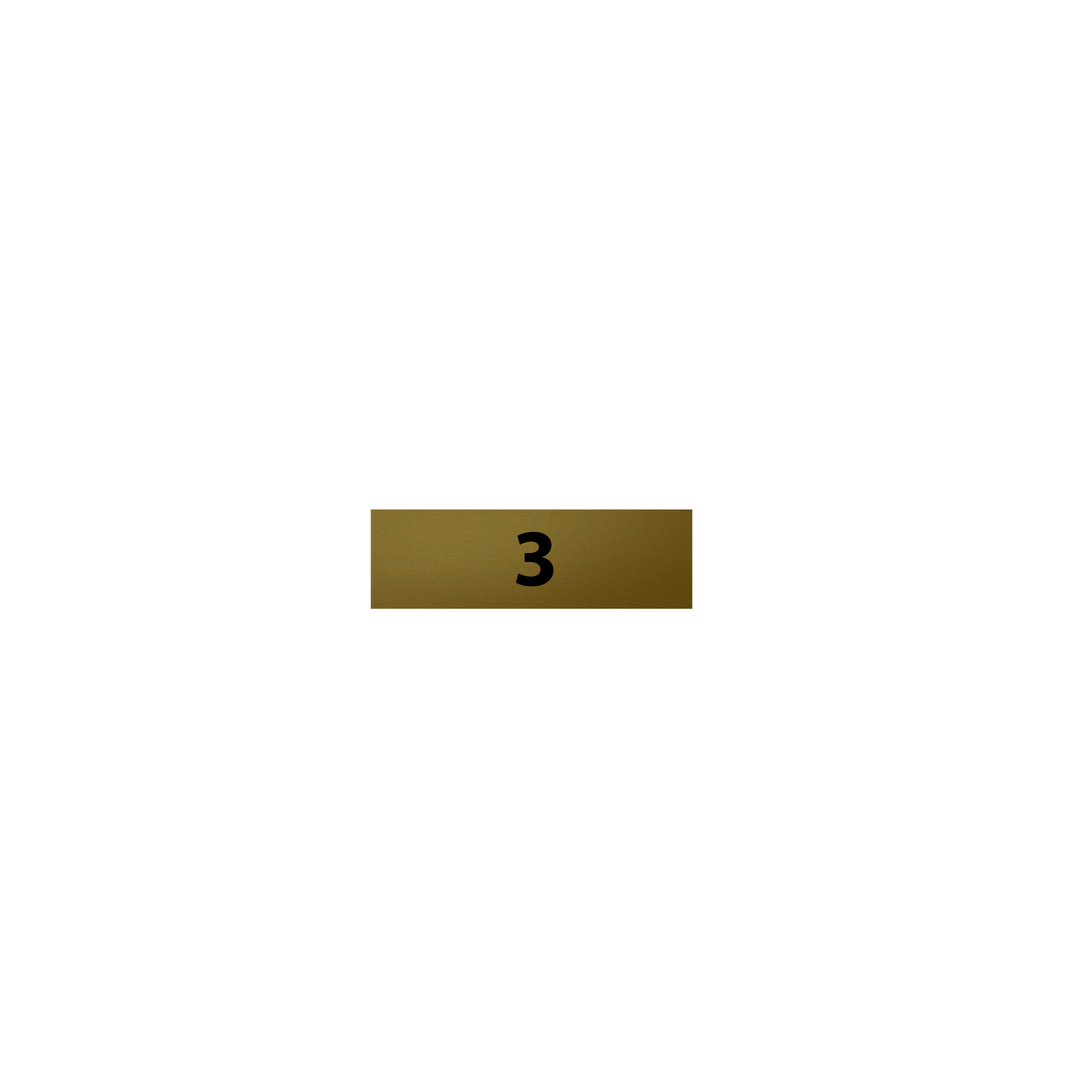
<style>
.page{position:relative;width:1092px;height:1092px;background:#ffffff}
.page>*{position:absolute;margin:0}
.t1{font:81.9px "MyriadPro-Bold";color:#000000}
</style>
<div class="page">
<p class="t1" style="left:515px;top:532px;width:39px;height:54px">3</p>
</div>
